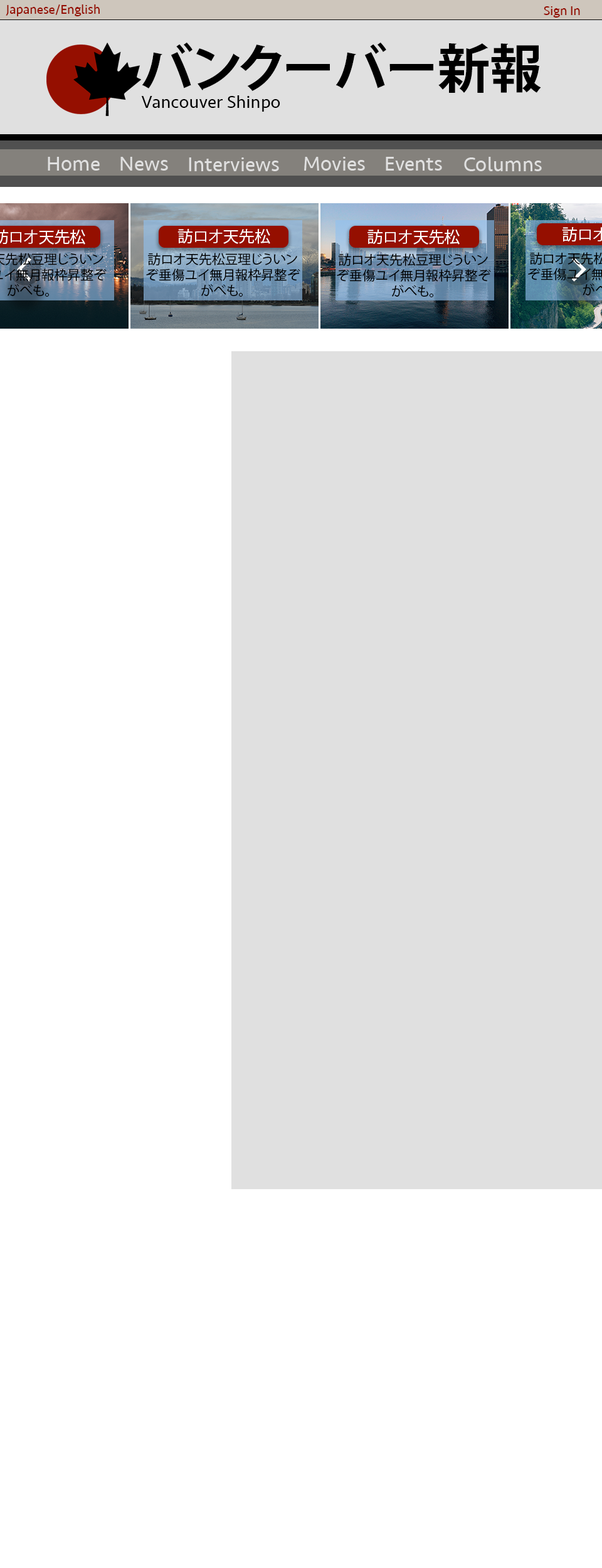
<style>
.page{position:relative;width:602px;height:1568px;background:#ffffff}
.page>*{position:absolute;margin:0}
.t1{font:13.1px "Seravek";color:#950e00}
.t2{font:52.3px "KozGoPr6N-Bold";color:#000000}
.t3{font:18.3px "Seravek";color:#000000}
.t4{font:20.9px "Seravek";color:#e0e0e0}
.t5{font:15.7px "KozGoPr6N-Regular";color:#ffffff}
.t6{font:13.1px "KozGoPr6N-Regular";color:#000000}
</style>
<div class="page">
<p class="t1" style="left:6px;top:4px;width:94px;height:12px">Japanese/English</p>
<p class="t1" style="left:544px;top:6px;width:36px;height:12px">Sign In</p>
<p class="t2" style="left:142px;top:42px;width:399px;height:51px">バンクーバー新報</p>
<p class="t3" style="left:141px;top:95px;width:139px;height:17px">Vancouver Shinpo</p>
<p class="t4" style="left:48px;top:157px;width:52px;height:14px">Home</p>
<p class="t4" style="left:120px;top:157px;width:48px;height:14px">News</p>
<p class="t4" style="left:189px;top:157px;width:90px;height:14px">Interviews</p>
<p class="t4" style="left:304px;top:157px;width:61px;height:14px">Movies</p>
<p class="t4" style="left:386px;top:157px;width:56px;height:14px">Events</p>
<p class="t4" style="left:464px;top:157px;width:78px;height:14px">Columns</p>
<p class="t5" style="left:177px;top:229px;width:93px;height:15px">訪ロオ天先松豆理</p>
<p class="t5" style="left:368px;top:230px;width:92px;height:15px">訪ロオ天先松豆理</p>
<p class="t6" style="left:146px;top:253px;width:154px;height:44px;text-align:center">訪ロオ天先松豆理じういンぞ垂傷ユイ無月報枠昇整ぞがべも。</p>
<p class="t6" style="left:337px;top:253px;width:154px;height:44px;text-align:center">訪ロオ天先松豆理じういンぞ垂傷ユイ無月報枠昇整ぞがべも。</p>
</div>
